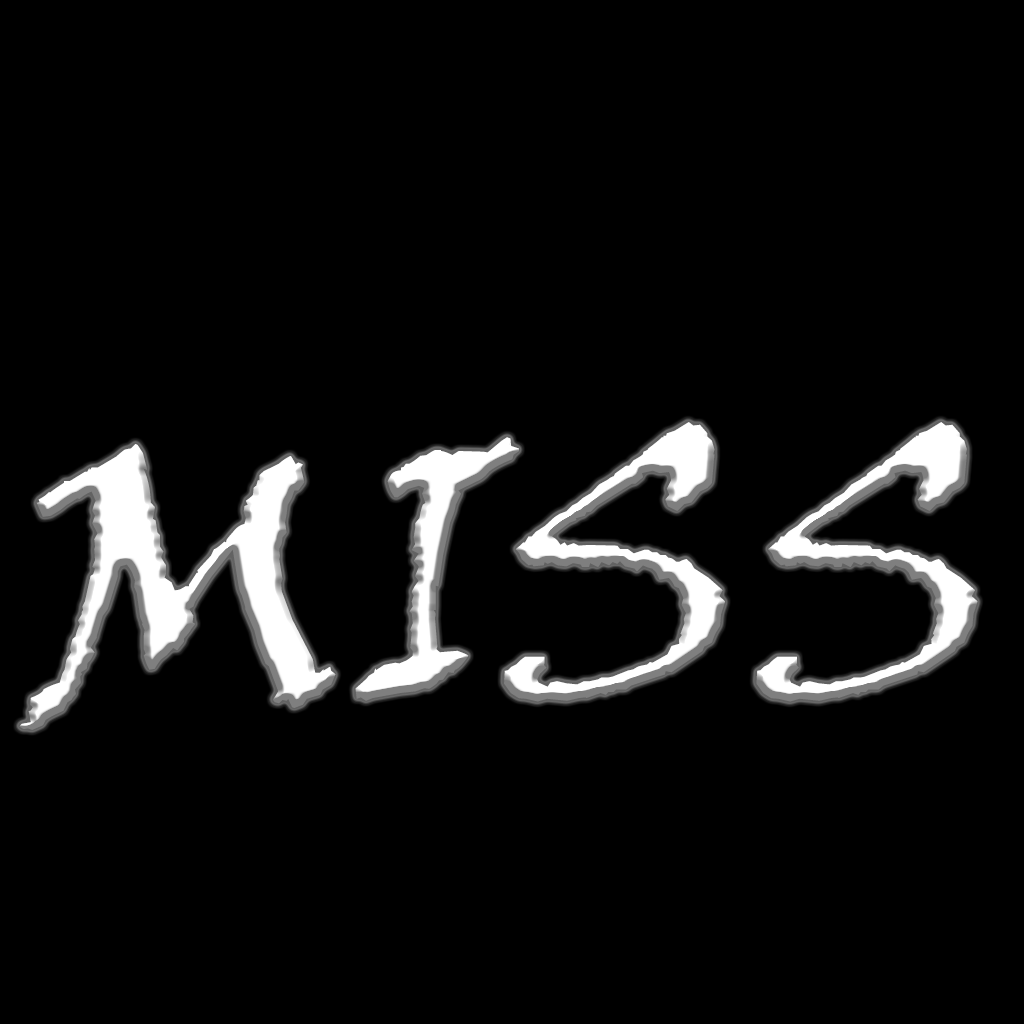
<style>
.page{position:relative;width:1024px;height:1024px;background:#000000}
.page>*{position:absolute;margin:0}
.t1{font:370px "VinerHandITC";color:#ffffff}
</style>
<div class="page">
<p class="t1" style="left:19px;top:422px;width:959px;height:308px">MISS</p>
</div>
